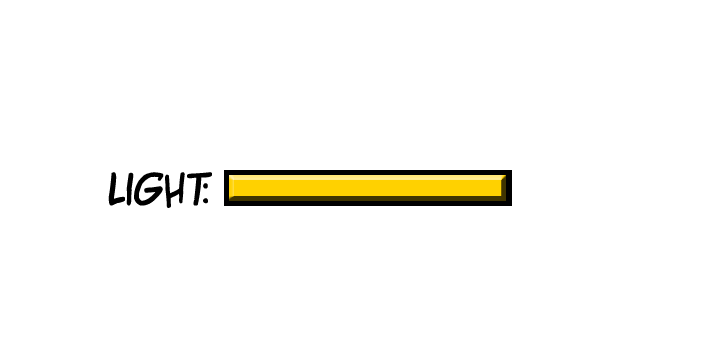
<style>
.page{position:relative;width:720px;height:360px;background:#ffffff}
.page>*{position:absolute;margin:0}
.t1{font:48px "SuperWebcomicBros.";color:#000000}
.t2{font:24px "SuperWebcomicBros.";color:#000000}
</style>
<div class="page">
<p class="t1" style="left:108px;top:172px;width:104px;height:36px"><span class="t2"><br></span>    Light:</p>
</div>
